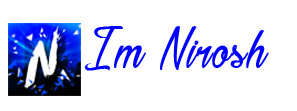
<style>
.page{position:relative;width:297px;height:111px;background:#ffffff}
.page>*{position:absolute;margin:0}
.t1{font:60px "Baldaquin";letter-spacing:0.03em;color:#0000ff}
</style>
<div class="page">
<p class="t1" style="left:84px;top:26px;width:185px;height:45px">Im Nirosh</p>
</div>
